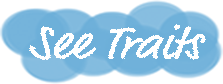
<style>
.page{position:relative;width:223px;height:84px;background:#ffffff}
.page>*{position:absolute;margin:0}
.t1{font:48px "MarketOT";color:#ffffff;scale:1.1 1}
</style>
<div class="page">
<p class="t1" style="left:29px;top:24px;width:177px;height:36px">See Traits</p>
</div>
